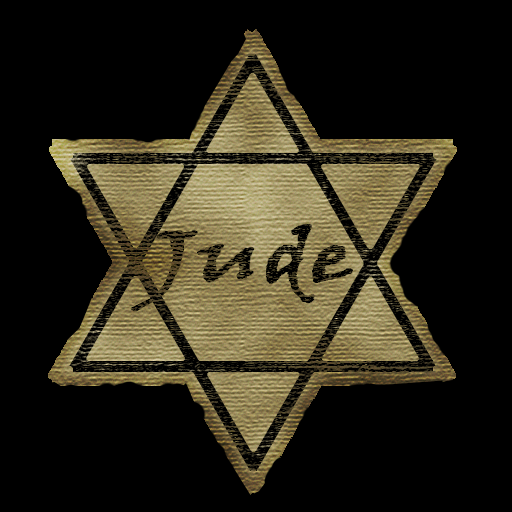
<style>
.page{position:relative;width:512px;height:512px;background:#000000}
.page>*{position:absolute;margin:0}
.t1{font:72px "VinerHandITC";font-weight:bold;scale:1.3 1}
</style>
<div class="page">
<p class="t1" style="left:131px;top:224px;width:222px;height:88px">Jude</p>
</div>
